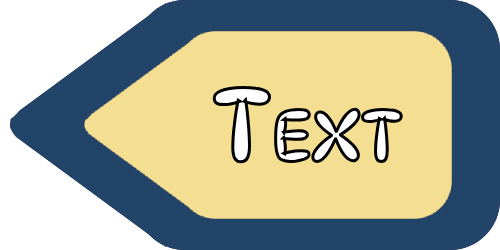
<style>
.page{position:relative;width:500px;height:250px;background:#f3de91}
.page>*{position:absolute;margin:0}
.t1{font:100px "DynaPuff-Regular";font-variant:small-caps}
</style>
<div class="page">
<p class="t1" style="left:211px;top:84px;width:194px;height:81px">Text</p>
</div>
